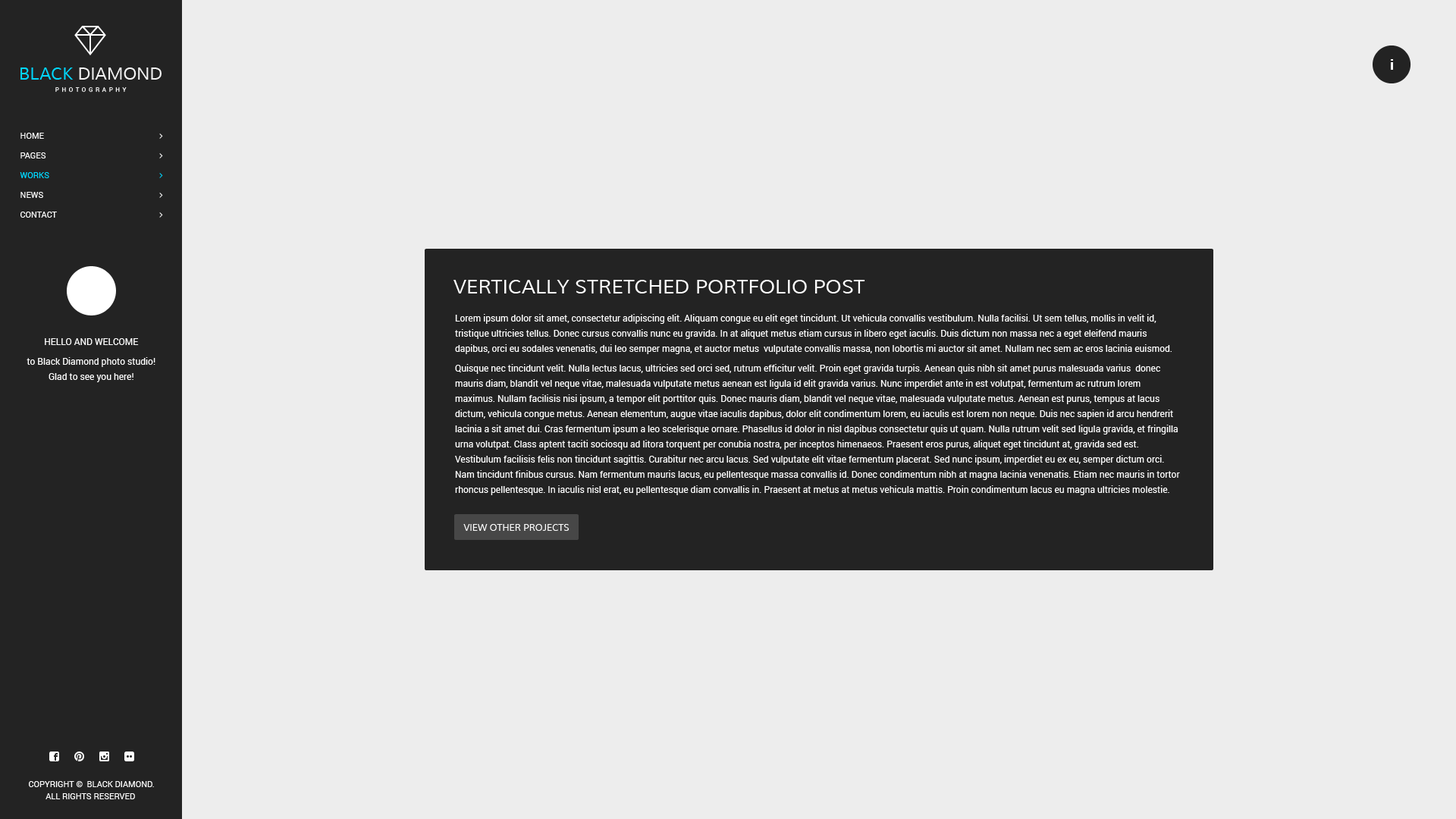
<style>
.page{position:relative;width:1456px;height:819px;background:#ededed}
.page>*{position:absolute;margin:0}
.t1{font:8.3px/19.7px "Roboto-Regular";color:#ffffff;text-transform:uppercase}
.t2{font:8.3px/19.7px "Roboto-Regular";color:#00d8ff;text-transform:uppercase}
.t3{font:19.7px "Muli";color:#ffffff;text-transform:uppercase}
.t4{font:9.1px/15.2px "Roboto-Regular";color:#ffffff}
.t5{font:9.1px/19.7px "Roboto-Regular";color:#ffffff}
.t6{font:9.1px/15.2px "Roboto-Regular";color:#ffffff;text-transform:uppercase}
.t7{font:9.1px "Muli";color:#ffffff;text-transform:uppercase}
.t8{font:8.3px/12.1px "Roboto-Regular";color:#ffffff;text-transform:uppercase}
</style>
<div class="page">
<p class="t1" style="left:20px;top:133px;width:37px;height:85px">home<br>Pages<br><span class="t2">Works<br></span>News<br>Contact</p>
<p class="t1" style="left:20px;top:133px;width:37px;height:85px">home<br>Pages<br><span class="t2">Works<br></span>News<br>Contact</p>
<p class="t3" style="left:453px;top:280px;width:412px;height:13px">Vertically stretched Portfolio Post</p>
<p class="t4" style="left:455px;top:314px;width:725px;height:181px">Lorem ipsum dolor sit amet, consectetur adipiscing elit. Aliquam congue eu elit eget tincidunt. Ut vehicula convallis vestibulum. Nulla facilisi. Ut sem tellus, mollis in velit id, tristique ultricies tellus. Donec cursus convallis nunc eu gravida. In at aliquet metus etiam cursus in libero eget iaculis. Duis dictum non massa nec a eget eleifend mauris dapibus, orci eu sodales venenatis, dui leo semper magna, et auctor metus  vulputate convallis massa, non lobortis mi auctor sit amet. Nullam nec sem ac eros lacinia euismod. <br><span class="t5">Q</span>uisque nec tincidunt velit. Nulla lectus lacus, ultricies sed orci sed, rutrum efficitur velit. Proin eget gravida turpis. Aenean quis nibh sit amet purus malesuada varius  donec mauris diam, blandit vel neque vitae, malesuada vulputate metus aenean est ligula id elit gravida varius. Nunc imperdiet ante in est volutpat, fermentum ac rutrum lorem maximus. Nullam facilisis nisi ipsum, a tempor elit porttitor quis. Donec mauris diam, blandit vel neque vitae, malesuada vulputate metus. Aenean est purus, tempus at lacus dictum, vehicula congue metus. Aenean elementum, augue vitae iaculis dapibus, dolor elit condimentum lorem, eu iaculis est lorem non neque. Duis nec sapien id arcu hendrerit lacinia a sit amet dui. Cras fermentum ipsum a leo scelerisque ornare. Phasellus id dolor in nisl dapibus consectetur quis ut quam. Nulla rutrum velit sed ligula gravida, et fringilla urna volutpat. Class aptent taciti sociosqu ad litora torquent per conubia nostra, per inceptos himenaeos. Praesent eros purus, aliquet eget tincidunt at, gravida sed est. Vestibulum facilisis felis non tincidunt sagittis. Curabitur nec arcu lacus. Sed vulputate elit vitae fermentum placerat. Sed nunc ipsum, imperdiet eu ex eu, semper dictum orci. Nam tincidunt finibus cursus. Nam fermentum mauris lacus, eu pellentesque massa convallis id. Donec condimentum nibh at magna lacinia venenatis. Etiam nec mauris in tortor rhoncus pellentesque. In iaculis nisl erat, eu pellentesque diam convallis in. Praesent at metus at metus vehicula mattis. Proin condimentum lacus eu magna ultricies molestie. Sed dictum eleifend sagittis. Cras nec egestas lectus. Maecenas vel porta dui. Fusce vel mi ut turpis fringilla luctus. Suspendisse tempor tempor enim, vehicula pellentesque.<br> nibh varius nec. Praesent ac orci imperdiet, feugiat mi facilisis, vestibulum mi.</p>
<p class="t4" style="left:27px;top:338px;width:128px;height:44px;text-align:center"><span class="t6">Hello And Welcome<br></span><span class="t5">t</span>o Black Diamond photo studio!<br>Glad to see you here!</p>
<p class="t4" style="left:27px;top:338px;width:128px;height:44px;text-align:center"><span class="t6">Hello And Welcome<br></span><span class="t5">t</span>o Black Diamond photo studio!<br>Glad to see you here!</p>
<p class="t7" style="left:463px;top:524px;width:106px;height:7px">View Other Projects</p>
<p class="t8" style="left:29px;top:781px;width:125px;height:18px;text-align:center">Copyright ©  Black Diamond.<br>All Rights Reserved</p>
<p class="t8" style="left:29px;top:781px;width:125px;height:18px;text-align:center">Copyright ©  Black Diamond.<br>All Rights Reserved</p>
</div>
